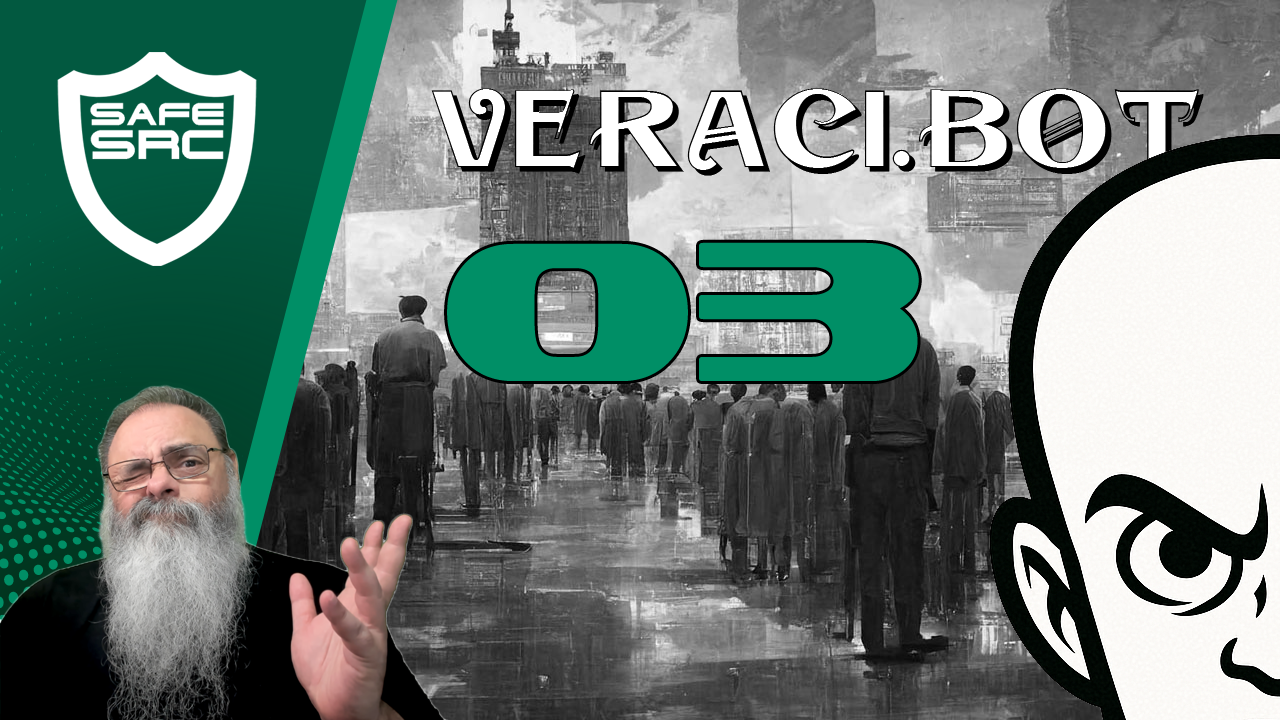
<style>
.page{position:relative;width:1280px;height:720px}
.page>*{position:absolute;margin:0}
.t1{font:95px "Sesame-Shadow";color:#000000}
.t2{font:200px "Sofachrome";color:#008f66}
</style>
<div class="page">
<p class="t1" style="left:431px;top:88px;width:773px;height:88px">VERACI.BOT</p>
<p class="t2" style="left:447px;top:242px;width:472px;height:139px">03</p>
</div>
